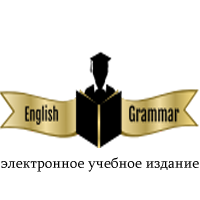
<style>
.page{position:relative;width:200px;height:200px;background:#ffffff}
.page>*{position:absolute;margin:0}
.t1{font:15px "Sylfaen";color:#000000}
</style>
<div class="page">
<p class="t1" style="left:1px;top:157px;width:198px;height:15px">электронное учебное издание</p>
</div>
